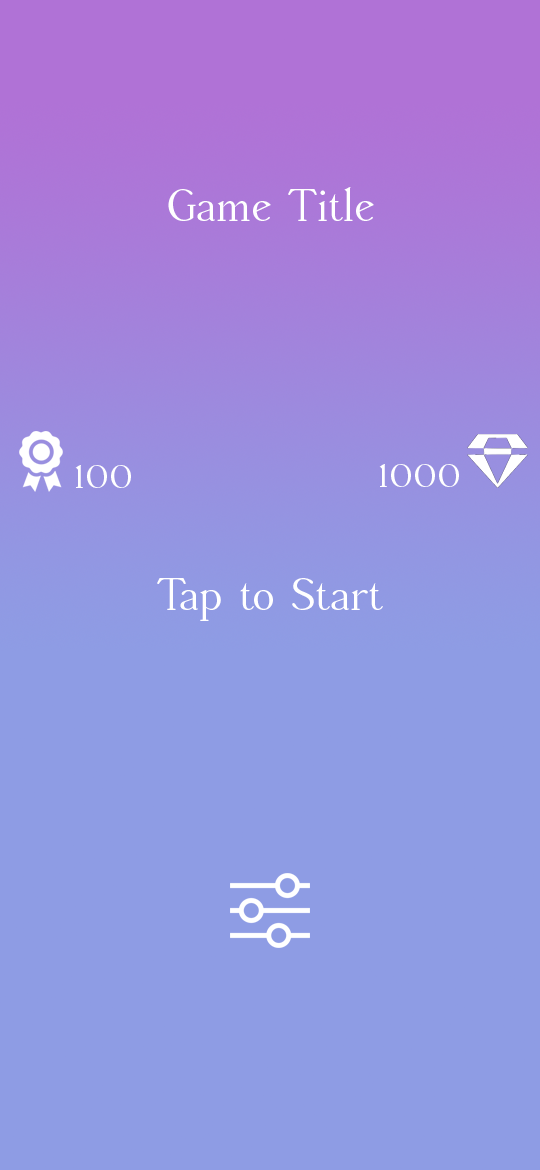
<style>
.page{position:relative;width:540px;height:1170px;background:#8e9ce4}
.page>*{position:absolute;margin:0}
.t1{font:45px "AccanthisADFStdNo2-Regular";color:#ffffff}
.t2{font:38px "AccanthisADFStdNo2-Regular";color:#ffffff}
</style>
<div class="page">
<p class="t1" style="left:168px;top:187px;width:206px;height:34px">Game Title</p>
<p class="t2" style="left:75px;top:465px;width:56px;height:23px">100</p>
<p class="t2" style="left:379px;top:464px;width:80px;height:23px">1000</p>
<p class="t1" style="left:157px;top:578px;width:226px;height:43px">Tap to Start</p>
</div>
